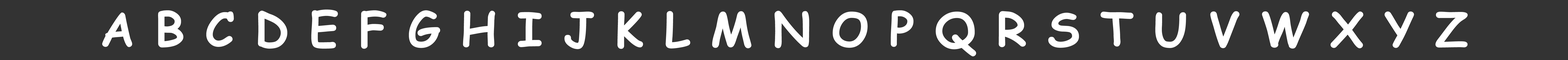
<style>
.page{position:relative;width:1568px;height:60px;background:#333333}
.page>*{position:absolute;margin:0}
.t1{font:47.1px "ComicSansMS-Bold";color:#ffffff}
</style>
<div class="page">
<p class="t1" style="left:102px;top:9px;width:1366px;height:48px">A B C D E F G H I J K L M N O P Q R S T U V W X Y Z</p>
</div>
